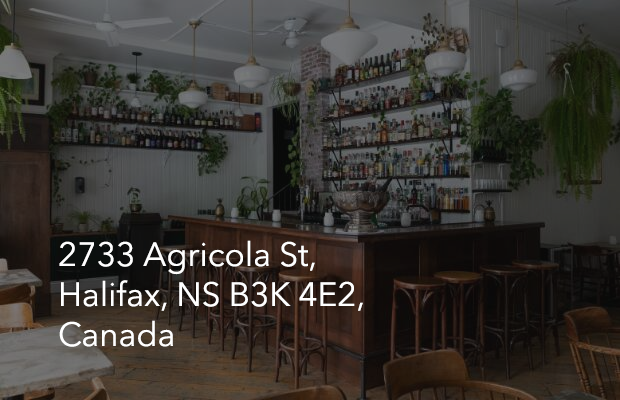
<style>
.page{position:relative;width:620px;height:400px}
.page>*{position:absolute;margin:0}
.t1{font:33.3px "AvenirNextLTPro-Regular";color:#ffffff}
</style>
<div class="page">
<p class="t1" style="left:59px;top:240px;width:304px;height:107px">2733 Agricola St, <br>Halifax, NS B3K 4E2,<br>Canada</p>
</div>
